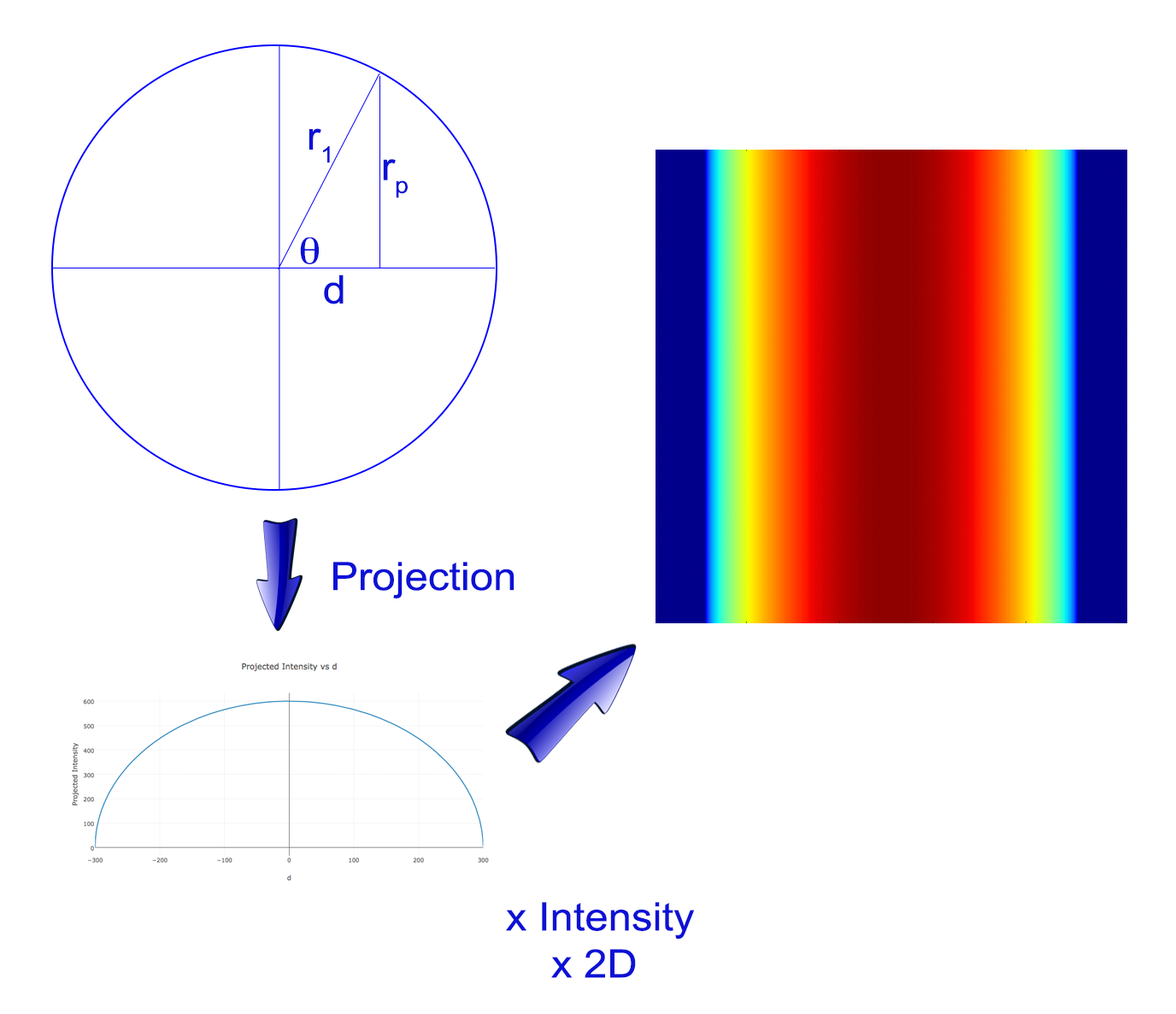
<style>
.page{position:relative;width:1176px;height:1014px;background:#ffffff}
.page>*{position:absolute;margin:0}
.t1{font:39.2px "ArialMT";color:#0c11d6;scale:1.07 1}
</style>
<div class="page">
<p class="t1" style="left:309px;top:128px;width:21px;height:35px">r1</p>
<p class="t1" style="left:383px;top:159px;width:25px;height:39px">rp</p>
<p class="t1" style="left:324px;top:274px;width:20px;height:30px">d</p>
<p class="t1" style="left:333px;top:562px;width:182px;height:36px">Projection</p>
<p class="t1" style="left:506px;top:902px;width:189px;height:76px;text-align:center">x Intensity<br>x 2D</p>
</div>
